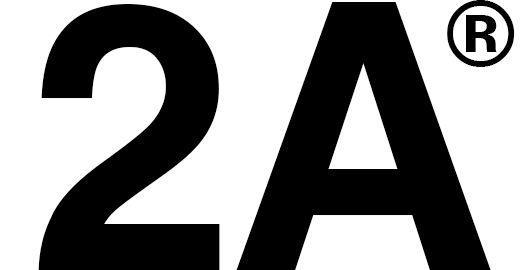
<style>
.page{position:relative;width:522px;height:270px;background:#ffffff}
.page>*{position:absolute;margin:0}
.t1{font:372.9px "Helvetica-Bold";letter-spacing:0.08em;color:#000000}
.t2{font:92.5px "Helvetica-Bold";letter-spacing:0.08em;color:#000000}
</style>
<div class="page">
<p class="t1" style="left:38px;top:2px;width:453px;height:268px">2A</p>
<p class="t2" style="left:447px;top:0px;width:68px;height:67px">®</p>
</div>
